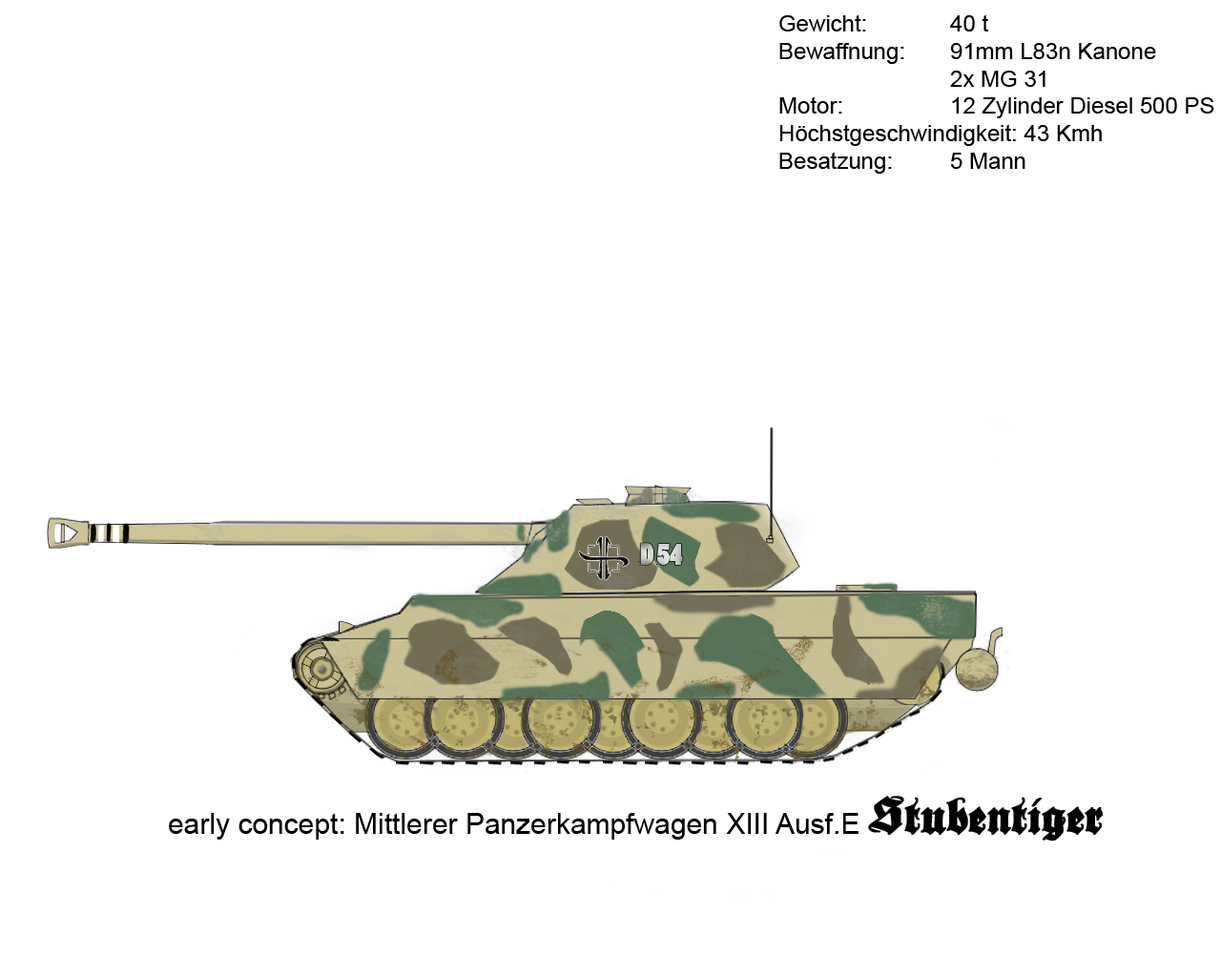
<style>
.page{position:relative;width:1221px;height:977px;background:#ffffff}
.page>*{position:absolute;margin:0}
.t1{font:22.9px "ArialMT";color:#000000}
.t2{font:28.6px "ArialMT";color:#000000}
.t3{font:45.8px "DeutscheZierschrift";color:#000000;font-weight:bold}
</style>
<div class="page">
<p class="t1" style="left:779px;top:14px;width:435px;height:160px">Gewicht:    40 t<br>Bewaffnung:   91mm L83n Kanone<br>     2x MG 31<br>Motor:    12 Zylinder Diesel 500 PS<br>Höchstgeschwindigkeit: 43 Kmh<br>Besatzung:   5 Mann</p>
<p class="t2" style="left:169px;top:795px;width:935px;height:46px">early concept: Mittlerer Panzerkampfwagen XIII Ausf.E <span class="t3">Stubentiger</span></p>
</div>
